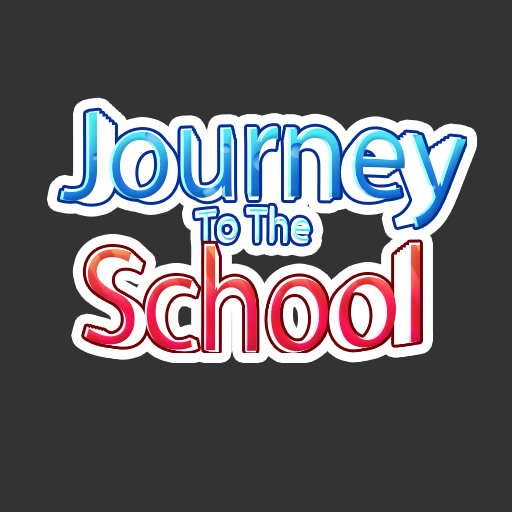
<style>
.page{position:relative;width:512px;height:512px;background:#333333}
.page>*{position:absolute;margin:0}
.t1{font:125px "MyriadPro-Regular";letter-spacing:-0.01em}
.t2{font:41.7px "MyriadPro-Regular";letter-spacing:-0.01em}
.t3{font:137.5px "MyriadPro-Regular";letter-spacing:-0.005em;scale:0.91 1}
</style>
<div class="page">
<p class="t1" style="left:59px;top:111px;width:408px;height:117px">Journey</p>
<p class="t2" style="left:195px;top:208px;width:115px;height:35px">To The</p>
<p class="t2" style="left:195px;top:208px;width:114px;height:34px">To The</p>
<p class="t2" style="left:195px;top:207px;width:115px;height:34px">To The</p>
<p class="t2" style="left:195px;top:206px;width:114px;height:34px">To The</p>
<p class="t2" style="left:195px;top:205px;width:115px;height:34px">To The</p>
<p class="t2" style="left:195px;top:210px;width:114px;height:34px">To The</p>
<p class="t3" style="left:84px;top:242px;width:336px;height:110px">School</p>
</div>
